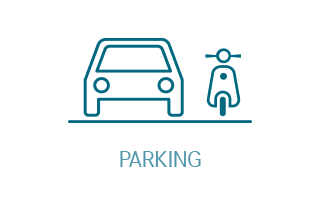
<style>
.page{position:relative;width:320px;height:200px;background:#ffffff}
.page>*{position:absolute;margin:0}
.t1{font:24px "CorporateS-Regular";color:#5097ab}
</style>
<div class="page">
<p class="t1" style="left:120px;top:151px;width:81px;height:16px">PARKING</p>
</div>
